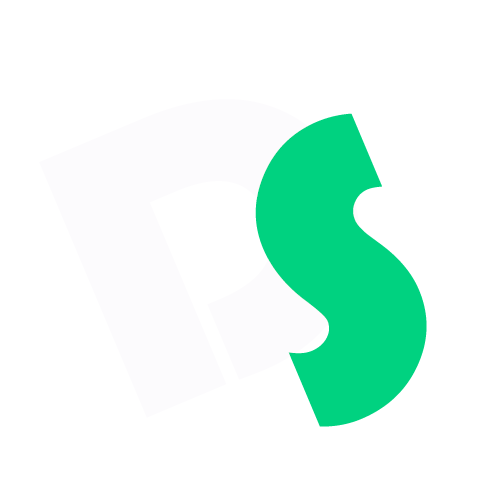
<style>
.page{position:relative;width:500px;height:500px;background:#ffffff}
.page>*{position:absolute;margin:0}
.t1{font:415.6px "Bauhaus93";letter-spacing:0.03em;color:#00d280;scale:1.04 1}
</style>
<div class="page">
<p class="t1" style="left:255px;top:113px;width:172px;height:314px;rotate:-23deg">S</p>
</div>
